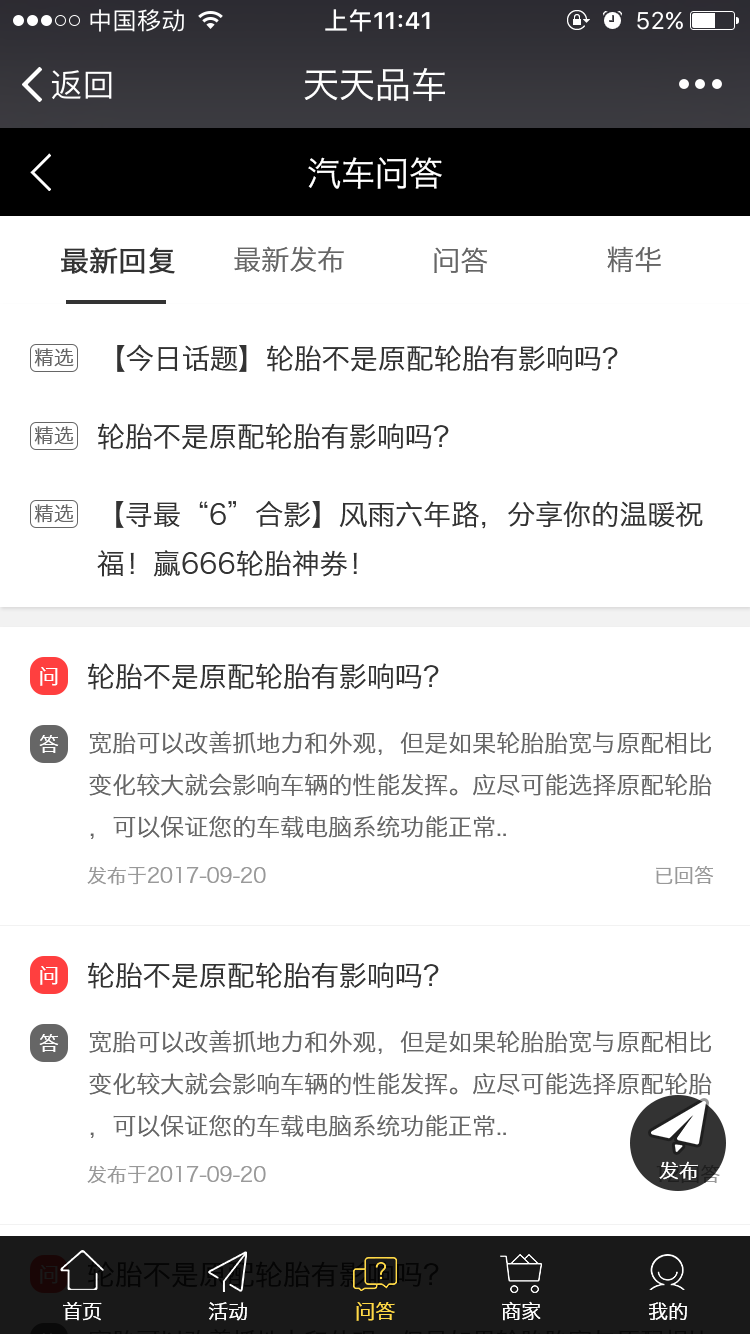
<style>
.page{position:relative;width:750px;height:1334px;background:#ffffff}
.page>*{position:absolute;margin:0}
.t1{font:36px "HiraginoSansGB-W3";color:#ffffff}
.t2{font:34px "HiraginoSansGB-W3";color:#ffffff}
.t3{font:28px "HiraginoSansGB-W3";color:#666666}
.t4{font:28px "HiraginoSansGB-W3";color:#333333;font-weight:bold}
.t5{font:20px "HiraginoSansGB-W3";color:#666666}
.t6{font:28px "HiraginoSansGB-W3";color:#333333;text-transform:uppercase}
.t7{font:20px "HiraginoSansGB-W3";color:#ffffff;text-transform:uppercase}
.t8{font:24px "HiraginoSansGB-W3";color:#666666;text-transform:uppercase}
.t9{font:20px "HiraginoSansGB-W3";color:#999999;text-transform:uppercase}
.t10{font:20px "HiraginoSansGB-W3";color:#191919;text-transform:uppercase}
.t11{font:20px "HiraginoSansGB-W3";color:#ffffff}
.t12{font:20px "HiraginoSansGB-W3";color:#ffd947}
</style>
<div class="page">
<p class="t1" style="left:304px;top:68px;width:141px;height:34px">天天品车</p>
<p class="t2" style="left:308px;top:157px;width:134px;height:32px">汽车问答</p>
<p class="t3" style="left:234px;top:246px;width:110px;height:27px">最新发布</p>
<p class="t3" style="left:607px;top:246px;width:54px;height:27px">精华</p>
<p class="t4" style="left:61px;top:247px;width:114px;height:27px">最新回复</p>
<p class="t3" style="left:434px;top:247px;width:54px;height:26px">问答</p>
<p class="t5" style="left:34px;top:348px;width:40px;height:19px">精选</p>
<p class="t6" style="left:117px;top:344px;width:501px;height:28px">【今日话题】轮胎不是原配轮胎有影响吗？</p>
<p class="t6" style="left:98px;top:423px;width:351px;height:27px">轮胎不是原配轮胎有影响吗？</p>
<p class="t5" style="left:34px;top:426px;width:40px;height:19px">精选</p>
<p class="t5" style="left:34px;top:504px;width:40px;height:19px">精选</p>
<p class="t6" style="left:97px;top:501px;width:606px;height:76px">【寻最“6”合影】风雨六年路，分享你的温暖祝<br>福！赢666轮胎神券！</p>
<p class="t6" style="left:88px;top:663px;width:351px;height:27px">轮胎不是原配轮胎有影响吗？</p>
<p class="t7" style="left:40px;top:667px;width:18px;height:19px">问</p>
<p class="t7" style="left:39px;top:735px;width:20px;height:18px">答</p>
<p class="t8" style="left:89px;top:731px;width:623px;height:108px">宽胎可以改善抓地力和外观，但是如果轮胎胎宽与原配相比变化较大就会影响车辆的性能发挥。应尽可能选择原配轮胎，可以保证您的车载电脑系统功能正常..</p>
<p class="t9" style="left:87px;top:866px;width:179px;height:19px">发布于2017-09-20</p>
<p class="t9" style="left:656px;top:866px;width:58px;height:19px">已回答</p>
<p class="t7" style="left:40px;top:966px;width:18px;height:19px">问</p>
<p class="t6" style="left:88px;top:962px;width:351px;height:27px">轮胎不是原配轮胎有影响吗？</p>
<p class="t7" style="left:39px;top:1034px;width:20px;height:18px">答</p>
<p class="t8" style="left:89px;top:1030px;width:623px;height:108px">宽胎可以改善抓地力和外观，但是如果轮胎胎宽与原配相比变化较大就会影响车辆的性能发挥。应尽可能选择原配轮胎，可以保证您的车载电脑系统功能正常..</p>
<p class="t9" style="left:87px;top:1165px;width:179px;height:19px">发布于2017-09-20</p>
<p class="t7" style="left:659px;top:1161px;width:39px;height:19px">发布</p>
<p class="t10" style="left:40px;top:1265px;width:18px;height:19px">问</p>
<p class="t11" style="left:63px;top:1302px;width:39px;height:19px">首页</p>
<p class="t11" style="left:208px;top:1302px;width:39px;height:19px">活动</p>
<p class="t12" style="left:356px;top:1302px;width:39px;height:19px">问答</p>
<p class="t11" style="left:502px;top:1301px;width:39px;height:20px">商家</p>
<p class="t11" style="left:649px;top:1302px;width:38px;height:18px">我的</p>
</div>
